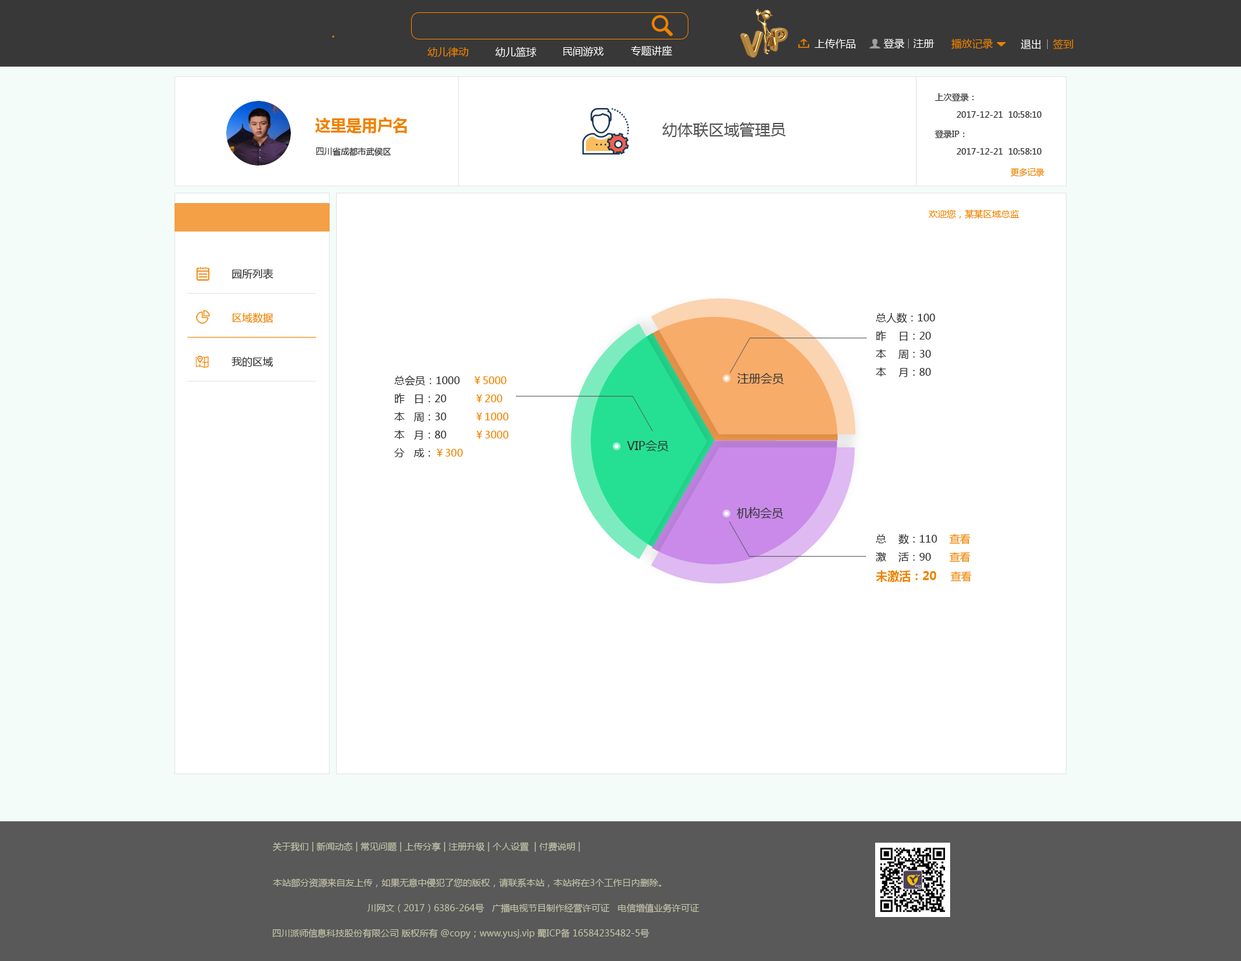
<style>
.page{position:relative;width:1241px;height:961px;background:#ffffff}
.page>*{position:absolute;margin:0}
.t1{font:10.3px "MicrosoftYaHei";color:#ffffff}
.t2{font:10.3px "MicrosoftYaHei";color:#ef8200}
.t3{font:8.4px "MicrosoftYaHei";color:#333333}
.t4{font:15.5px "MicrosoftYaHei-Bold";color:#ef8300}
.t5{font:15.5px "MicrosoftYaHei";color:#555555}
.t6{font:8.4px "MicrosoftYaHei";color:#ef8300}
.t7{font:9.1px "MicrosoftYaHei";color:#ef8300}
.t8{font:10.3px "MicrosoftYaHei";color:#333333}
.t9{font:10.3px "MicrosoftYaHei";color:#ef8300}
.t10{font:11.6px "MicrosoftYaHei";color:#333333}
.t11{font:11.6px "MicrosoftYaHei-Bold";color:#ef8200}
.t12{font:9.1px "MicrosoftYaHei";color:#c4c4aa}
</style>
<div class="page">
<p class="t1" style="left:815px;top:39px;width:41px;height:9px">上传作品</p>
<p class="t1" style="left:884px;top:38px;width:21px;height:10px">登录</p>
<p class="t1" style="left:913px;top:39px;width:21px;height:9px">注册</p>
<p class="t2" style="left:952px;top:39px;width:41px;height:10px">播放记录</p>
<p class="t1" style="left:1021px;top:39px;width:20px;height:10px">退出</p>
<p class="t2" style="left:1053px;top:39px;width:21px;height:10px">签到</p>
<p class="t2" style="left:427px;top:47px;width:42px;height:10px">幼儿律动</p>
<p class="t1" style="left:495px;top:47px;width:42px;height:10px">幼儿篮球</p>
<p class="t1" style="left:563px;top:47px;width:41px;height:9px">民间游戏</p>
<p class="t1" style="left:631px;top:45px;width:41px;height:11px">专题讲座</p>
<p class="t3" style="left:935px;top:93px;width:39px;height:8px">上次登录：</p>
<p class="t3" style="left:957px;top:111px;width:85px;height:7px">2017-12-21  10:58:10</p>
<p class="t4" style="left:315px;top:117px;width:92px;height:16px">这里是用户名</p>
<p class="t5" style="left:663px;top:122px;width:123px;height:15px">幼体联区域管理员</p>
<p class="t3" style="left:935px;top:130px;width:30px;height:8px">登录IP：</p>
<p class="t3" style="left:316px;top:147px;width:75px;height:9px">四川省成都市武侯区</p>
<p class="t3" style="left:957px;top:148px;width:85px;height:7px">2017-12-21  10:58:10</p>
<p class="t6" style="left:1010px;top:168px;width:35px;height:8px">更多记录</p>
<p class="t7" style="left:928px;top:209px;width:92px;height:10px">欢迎您，某某区域总监</p>
<p class="t8" style="left:232px;top:268px;width:41px;height:11px">园所列表</p>
<p class="t2" style="left:232px;top:312px;width:41px;height:11px">区域数据</p>
<p class="t8" style="left:876px;top:312px;width:59px;height:65px">总人数：100<br>昨    日：20<br>本    周：30<br>本    月：80</p>
<p class="t8" style="left:231px;top:357px;width:42px;height:10px">我的区域</p>
<p class="t8" style="left:394px;top:375px;width:115px;height:82px">总会员：1000    <span class="t9">￥5000<br></span>昨   日：20         <span class="t9">￥200<br></span>本   周：30         <span class="t9">￥1000<br></span>本   月：80         <span class="t9">￥3000<br></span>分   成：<span class="t9">￥300</span></p>
<p class="t10" style="left:738px;top:373px;width:46px;height:11px">注册会员</p>
<p class="t10" style="left:627px;top:440px;width:42px;height:11px">VIP会员</p>
<p class="t10" style="left:737px;top:507px;width:47px;height:11px">机构会员</p>
<p class="t8" style="left:876px;top:533px;width:96px;height:49px">总    数：110    <span class="t2">查看<br></span>激    活：90      <span class="t2">查看<br></span><span class="t11">未激活：20    </span><span class="t2">查看</span></p>
<p class="t12" style="left:273px;top:842px;width:307px;height:9px">关于我们 | 新闻动态 | 常见问题 | 上传分享 | 注册升级 | 个人设置  | 付费说明 |</p>
<p class="t12" style="left:273px;top:878px;width:388px;height:10px">本站部分资源来自友上传，如果无意中侵犯了您的版权，请联系本站，本站将在3个工作日内删除。</p>
<p class="t12" style="left:367px;top:903px;width:332px;height:10px">川网文（2017）6386-264号   广播电视节目制作经营许可证   电信增值业务许可证</p>
<p class="t12" style="left:273px;top:928px;width:377px;height:10px">四川派师信息科技股份有限公司 版权所有 @copy；www.yusj.vip 蜀ICP备 16584235482-5号</p>
</div>
